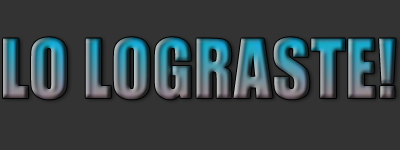
<style>
.page{position:relative;width:400px;height:150px;background:#333333}
.page>*{position:absolute;margin:0}
.t1{font:75px "Impact"}
</style>
<div class="page">
<p class="t1" style="left:3px;top:37px;width:393px;height:63px">LO LOGRASTE!</p>
</div>
